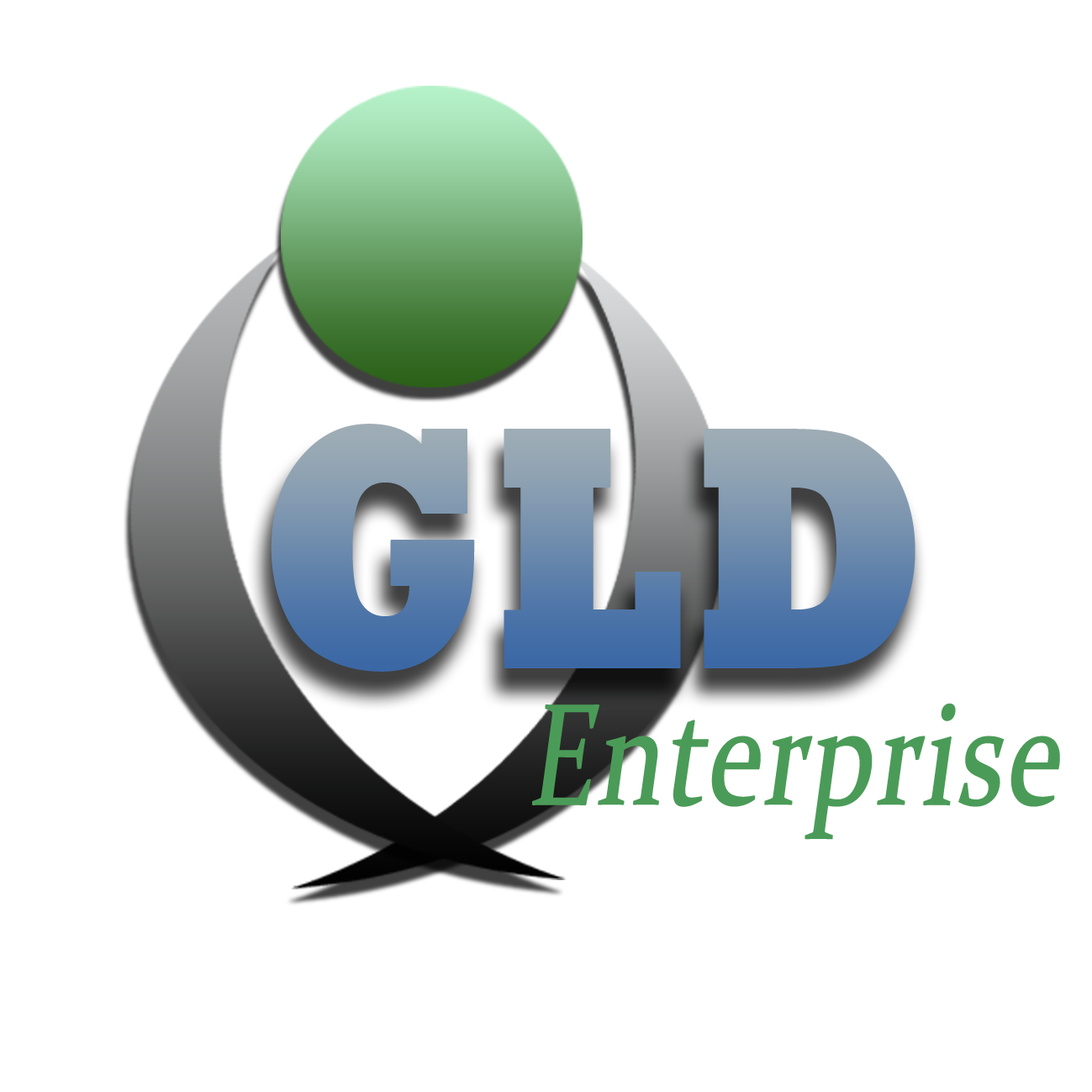
<style>
.page{position:relative;width:1092px;height:1092px;background:#ffffff}
.page>*{position:absolute;margin:0}
.t1{font:350.9px "Rockwell-ExtraBold";font-weight:bold;scale:0.77 1}
.t2{font:145.5px "Constantia";color:#4b9b58;font-weight:bold;font-style:italic;scale:0.77 1}
</style>
<div class="page">
<p class="t1" style="left:271px;top:424px;width:644px;height:248px">GLD</p>
<p class="t2" style="left:532px;top:703px;width:528px;height:137px">Enterprise</p>
</div>
